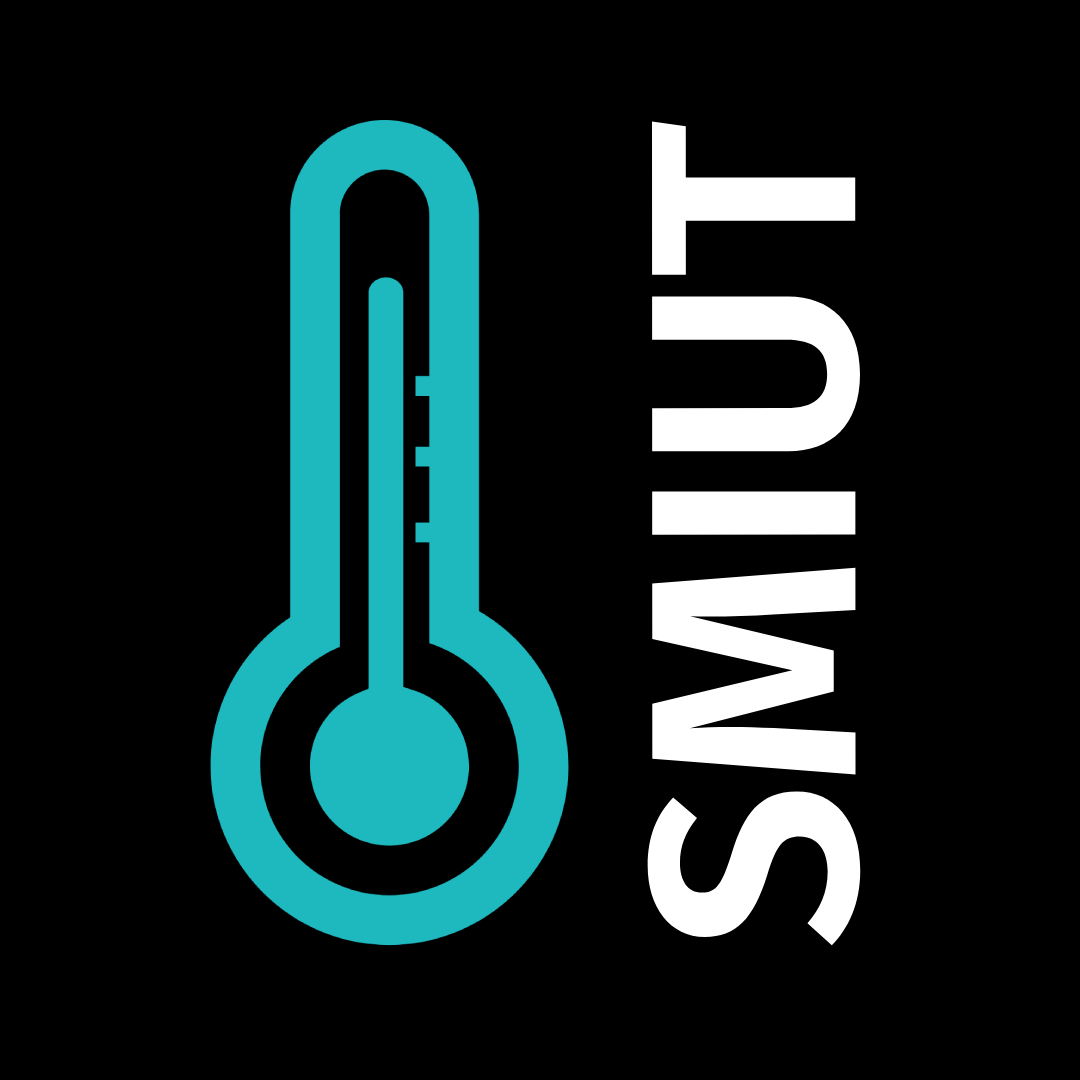
<style>
.page{position:relative;width:1080px;height:1080px;background:#000000}
.page>*{position:absolute;margin:0}
.t1{font:293.6px "FiraSans-SemiBold";color:#ffffff}
</style>
<div class="page">
<p class="t1" style="left:647px;top:121px;width:214px;height:825px;rotate:-90deg">SMIUT</p>
</div>
